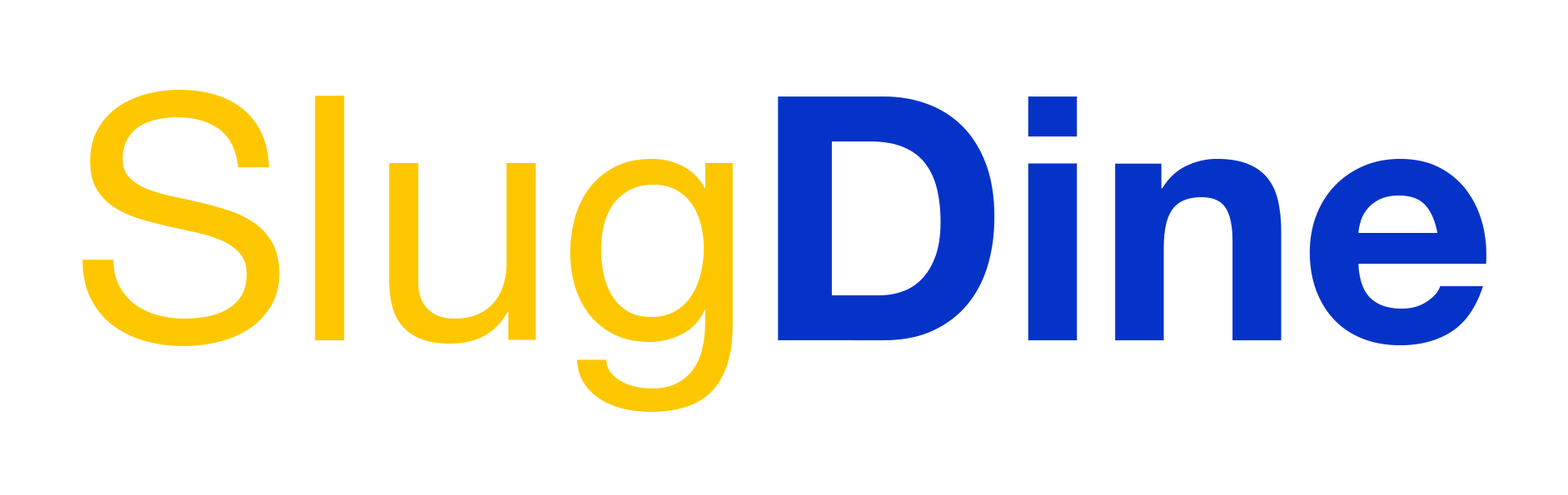
<style>
.page{position:relative;width:1568px;height:495px;background:#ffffff}
.page>*{position:absolute;margin:0}
.t1{font:342.6px "HelveticaNeue";color:#fdc700}
.t2{font:342.6px "HelveticaNeue-Bold";color:#0533c8}
</style>
<div class="page">
<p class="t1" style="left:82px;top:90px;width:1404px;height:322px">Slug<span class="t2">Dine</span></p>
</div>
